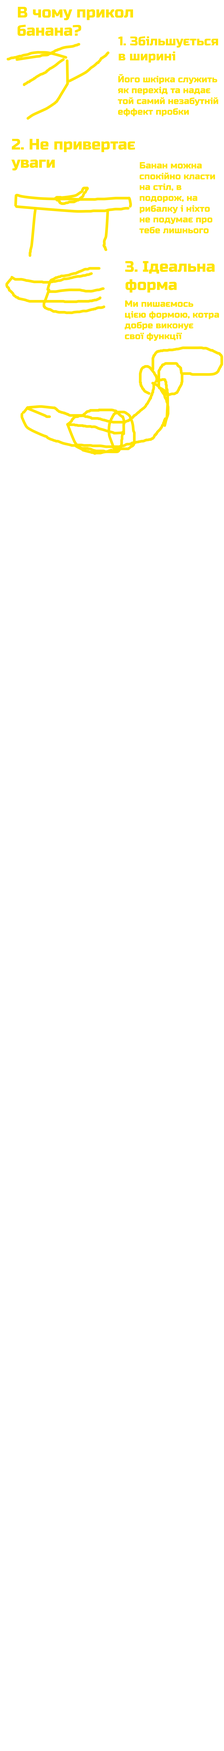
<style>
.page{position:relative;width:224px;height:1751px;background:#ffffff}
.page>*{position:absolute;margin:0}
.t1{font:12.6px "RussoOne-Regular";color:#ffe400}
.t2{font:9px "RussoOne-Regular";color:#ffe400}
.t3{font:15.2px "RussoOne-Regular";color:#ffe400}
</style>
<div class="page">
<p class="t1" style="left:118px;top:36px;width:100px;height:27px">1. Збільшується<br>в ширині</p>
<p class="t2" style="left:118px;top:74px;width:100px;height:42px">Його шкірка служить<br>як перехід та надає<br>той самий незабутній<br>еффект пробки</p>
<p class="t3" style="left:11px;top:139px;width:124px;height:32px">2. Не привертає<br>уваги</p>
<p class="t2" style="left:139px;top:162px;width:76px;height:71px">Банан можна<br>спокійно класти<br>на стіл, в <br>подорож, на<br>рибалку і ніхто<br>не подумає про<br>тебе лишнього</p>
<p class="t2" style="left:125px;top:300px;width:94px;height:41px">Ми пишаємось <br>цією формою, котра<br>добре виконує<br>свої функції</p>
</div>
